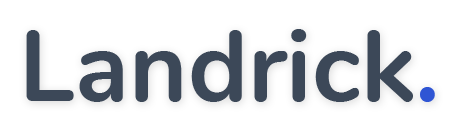
<style>
.page{position:relative;width:467px;height:129px;background:#ffffff}
.page>*{position:absolute;margin:0}
.t1{font:100px "Nunito-Bold";letter-spacing:0.002em;color:#3c4858}
.t2{font:100px "Nunito-Bold";letter-spacing:0.002em;color:#2f55d4}
</style>
<div class="page">
<p class="t1" style="left:26px;top:29px;width:409px;height:73px">Landrick<span class="t2">.</span></p>
</div>
